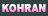
<style>
.page{position:relative;width:48px;height:16px;background:#314242}
.page>*{position:absolute;margin:0}
.t1{font:10.5px "Arial-Black";scale:0.87 1}
</style>
<div class="page">
<p class="t1" style="left:2px;top:4px;width:44px;height:8px">KOHRAN</p>
</div>
